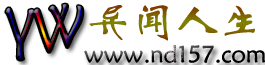
<style>
.page{position:relative;width:265px;height:65px;background:#ffffff}
.page>*{position:absolute;margin:0}
.t1{font:65.1px "STXinwei";scale:0.74 1}
.t2{font:36px "STXinwei";color:#806f00}
.t3{font:24px "STXinwei"}
</style>
<div class="page">
<p class="t1" style="left:5px;top:4px;width:78px;height:56px">YW</p>
<p class="t2" style="left:89px;top:5px;width:166px;height:36px">异闻人生</p>
<p class="t3" style="left:84px;top:45px;width:181px;height:18px">www.nd157.com</p>
</div>
